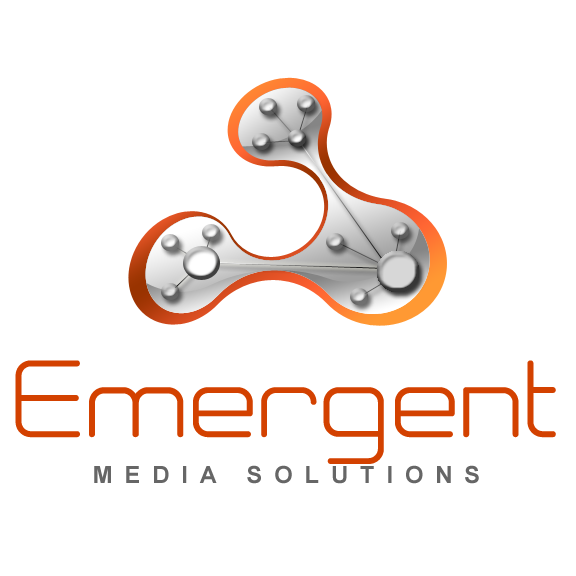
<style>
.page{position:relative;width:576px;height:576px;background:#ffffff}
.page>*{position:absolute;margin:0}
.t1{font:95.1px "Neogrey";letter-spacing:0.02em;color:#d34100}
.t2{font:23.8px "Arial-BoldMT";letter-spacing:0.5em;color:#666666}
</style>
<div class="page">
<p class="t1" style="left:15px;top:360px;width:541px;height:104px">Emergent</p>
<p class="t2" style="left:94px;top:465px;width:385px;height:19px">MEDIA SOLUTIONS</p>
</div>
